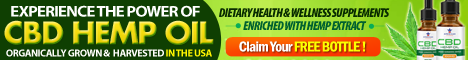
<style>
.page{position:relative;width:468px;height:60px;background:#0f3f02}
.page>*{position:absolute;margin:0}
.t1{font:15.5px "MyriadPro-BoldSemiExt";letter-spacing:-0.05em;color:#ffffff;text-transform:uppercase}
.t2{font:12.9px/12.9px "MyriadPro-BlackCondIt";letter-spacing:-0.05em;color:#082b00}
.t3{font:12.9px/12.9px "MyriadPro-BlackCondIt";letter-spacing:-0.05em;color:#00612f}
.t4{font:30.3px "FuturaLT-Bold";letter-spacing:-0.05em}
.t5{font:15px "FranklinGothic-DemiCond";letter-spacing:-0.05em;color:#fcff00;text-transform:uppercase}
.t6{font:15px "FranklinGothic-DemiCond";letter-spacing:-0.05em;color:#ffffff}
.t7{font:10.3px "MyriadPro-Bold";letter-spacing:-0.05em;color:#fffffc;text-transform:uppercase}
.t8{font:10.3px "MyriadPro-Bold";letter-spacing:-0.05em;color:#fff600;text-transform:uppercase}
</style>
<div class="page">
<p class="t1" style="left:11px;top:5px;width:189px;height:12px">Experience The Power Of</p>
<p class="t2" style="left:219px;top:8px;width:171px;height:22px">DIETARY HEALTH &amp; WELLNESS SUPPLEMENTS<br>                  <span class="t3">   ENRICHED WITH HEMP EXTRACT</span></p>
<p class="t4" style="left:4px;top:20px;width:210px;height:25px">CBD HEMP OIL</p>
<p class="t5" style="left:239px;top:41px;width:127px;height:11px"><span class="t6">Claim Your </span>Free Bottle !</p>
<p class="t7" style="left:6px;top:49px;width:206px;height:8px">Organically Grown &amp;  Harvested<span class="t8"> In The USA</span></p>
</div>
